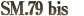
<style>
.page{position:relative;width:84px;height:16px;background:#ffffff}
.page>*{position:absolute;margin:0}
.t1{font:18px "RyuminPro-ExBold";letter-spacing:-0.06em;color:#4a3f32;font-weight:bold;scale:0.9 1}
</style>
<div class="page">
<p class="t1" style="left:0px;top:1px;width:69px;height:15px">SM.79 bis</p>
</div>
